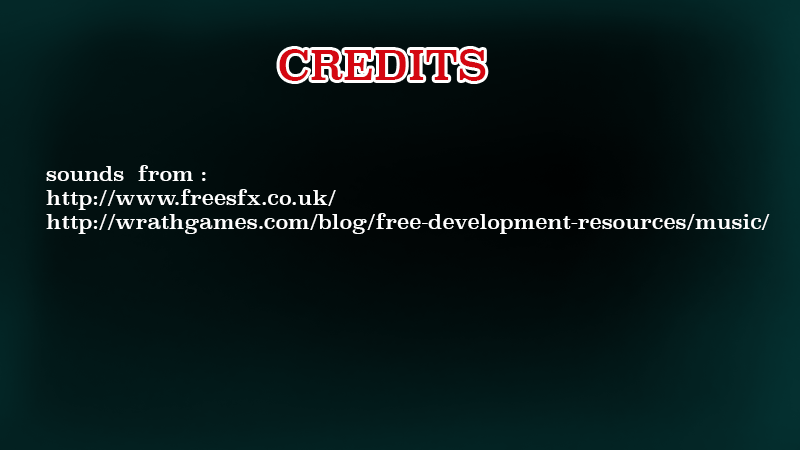
<style>
.page{position:relative;width:800px;height:450px}
.page>*{position:absolute;margin:0}
.t1{font:40.1px "Superclarendon-Regular";color:#d40711}
.t2{font:20px "Superclarendon-Regular";color:#ffffff}
</style>
<div class="page">
<p class="t1" style="left:279px;top:49px;width:207px;height:32px">CREDITS</p>
<p class="t2" style="left:46px;top:165px;width:724px;height:69px">sounds  from :<br>http://www.freesfx.co.uk/<br>http://wrathgames.com/blog/free-development-resources/music/</p>
</div>
